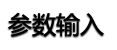
<style>
.page{position:relative;width:117px;height:50px;background:#ffffff}
.page>*{position:absolute;margin:0}
.t1{font:24px "MicrosoftYaHei";color:#000000}
</style>
<div class="page">
<p class="t1" style="left:8px;top:12px;width:96px;height:25px">参数输入</p>
</div>
